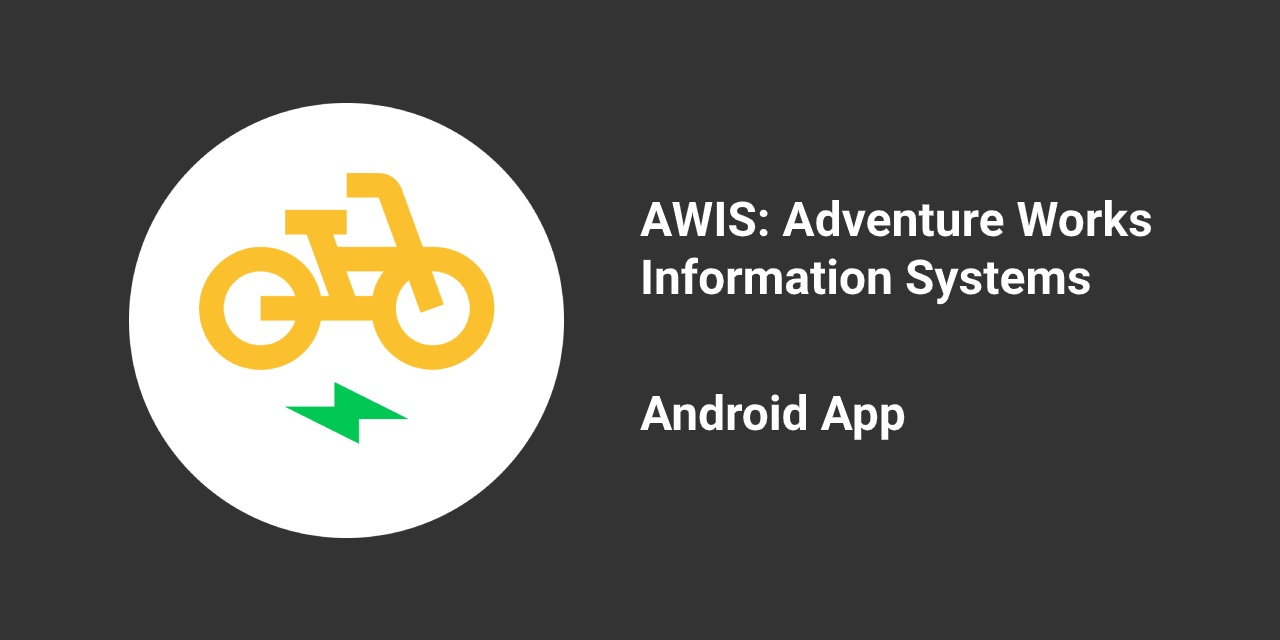
<style>
.page{position:relative;width:1280px;height:640px;background:#333333}
.page>*{position:absolute;margin:0}
.t1{font:48px "Roboto-Bold";color:#ffffff}
</style>
<div class="page">
<p class="t1" style="left:640px;top:200px;width:511px;height:105px">AWIS: Adventure Works <br>Information Systems</p>
<p class="t1" style="left:640px;top:394px;width:265px;height:46px">Android App</p>
</div>
